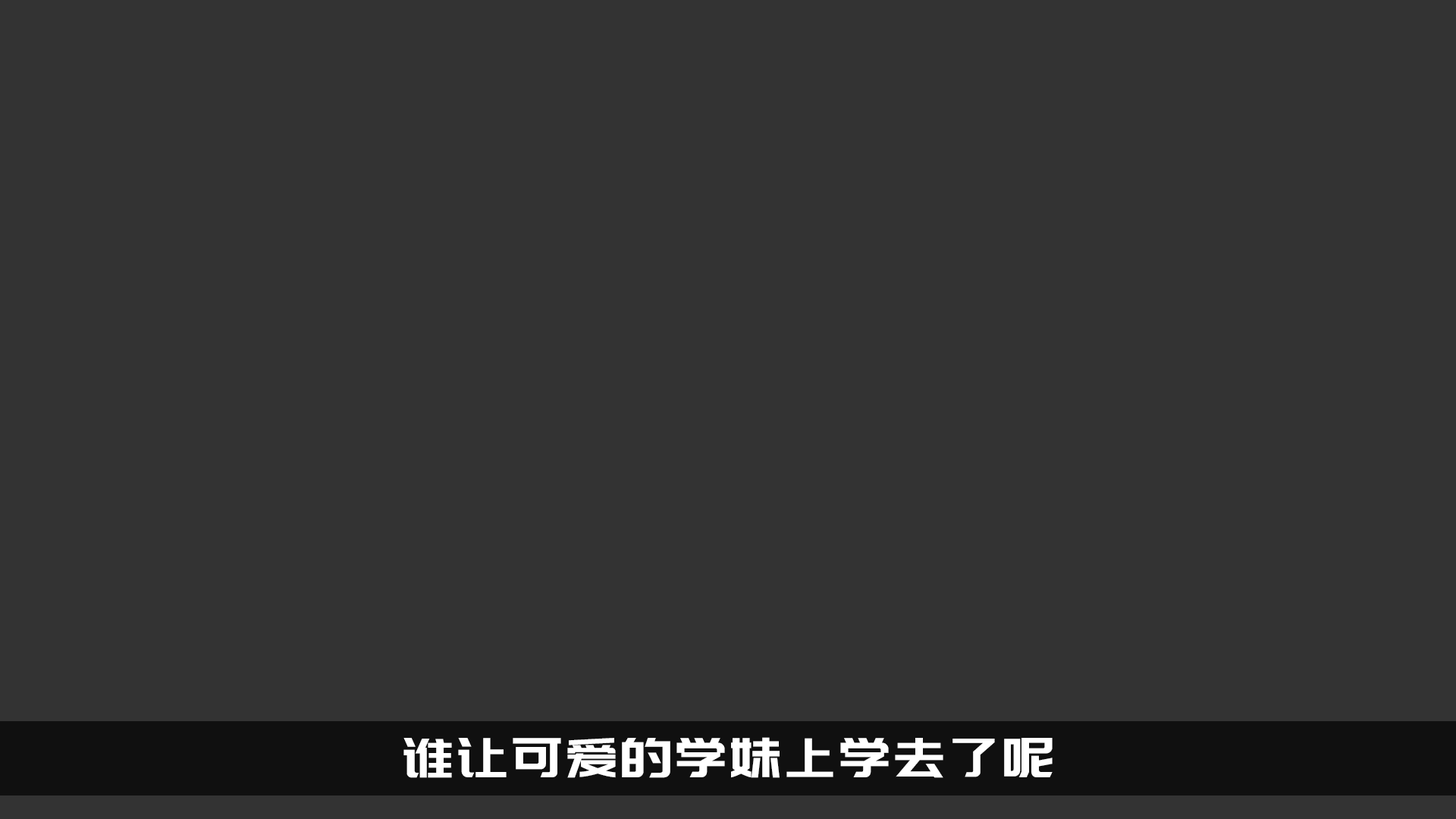
<style>
.page{position:relative;width:1456px;height:819px;background:#333333}
.page>*{position:absolute;margin:0}
.t1{font:54.6px "PangMenZhengDao-3";color:#ffffff}
</style>
<div class="page">
<p class="t1" style="left:403px;top:737px;width:650px;height:41px">谁让可爱的学妹上学去了呢</p>
</div>
